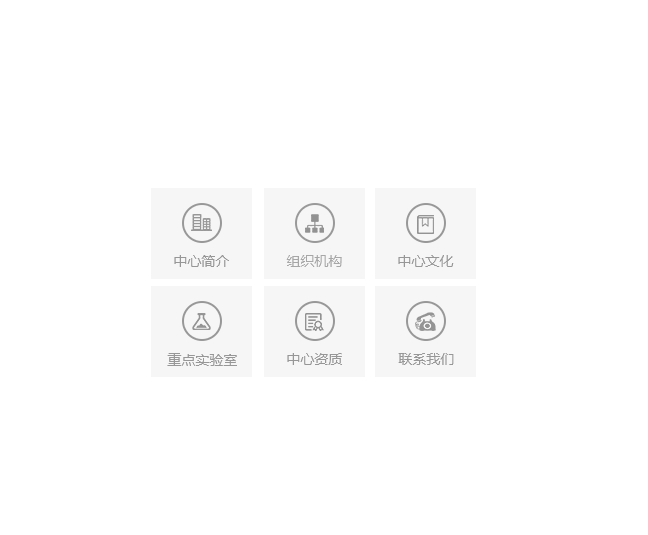
<style>
.page{position:relative;width:648px;height:535px;background:#ffffff}
.page>*{position:absolute;margin:0}
.t1{font:14px "MicrosoftYaHei";color:#979797}
.t2{font:14px "MicrosoftYaHei";color:#a7a7a7}
</style>
<div class="page">
<p class="t1" style="left:174px;top:255px;width:55px;height:12px">中心简介</p>
<p class="t2" style="left:286px;top:255px;width:56px;height:12px">组织机构</p>
<p class="t1" style="left:398px;top:255px;width:56px;height:12px">中心文化</p>
<p class="t1" style="left:167px;top:353px;width:70px;height:13px">重点实验室</p>
<p class="t1" style="left:287px;top:353px;width:55px;height:12px">中心资质</p>
<p class="t1" style="left:398px;top:353px;width:56px;height:12px">联系我们</p>
</div>
